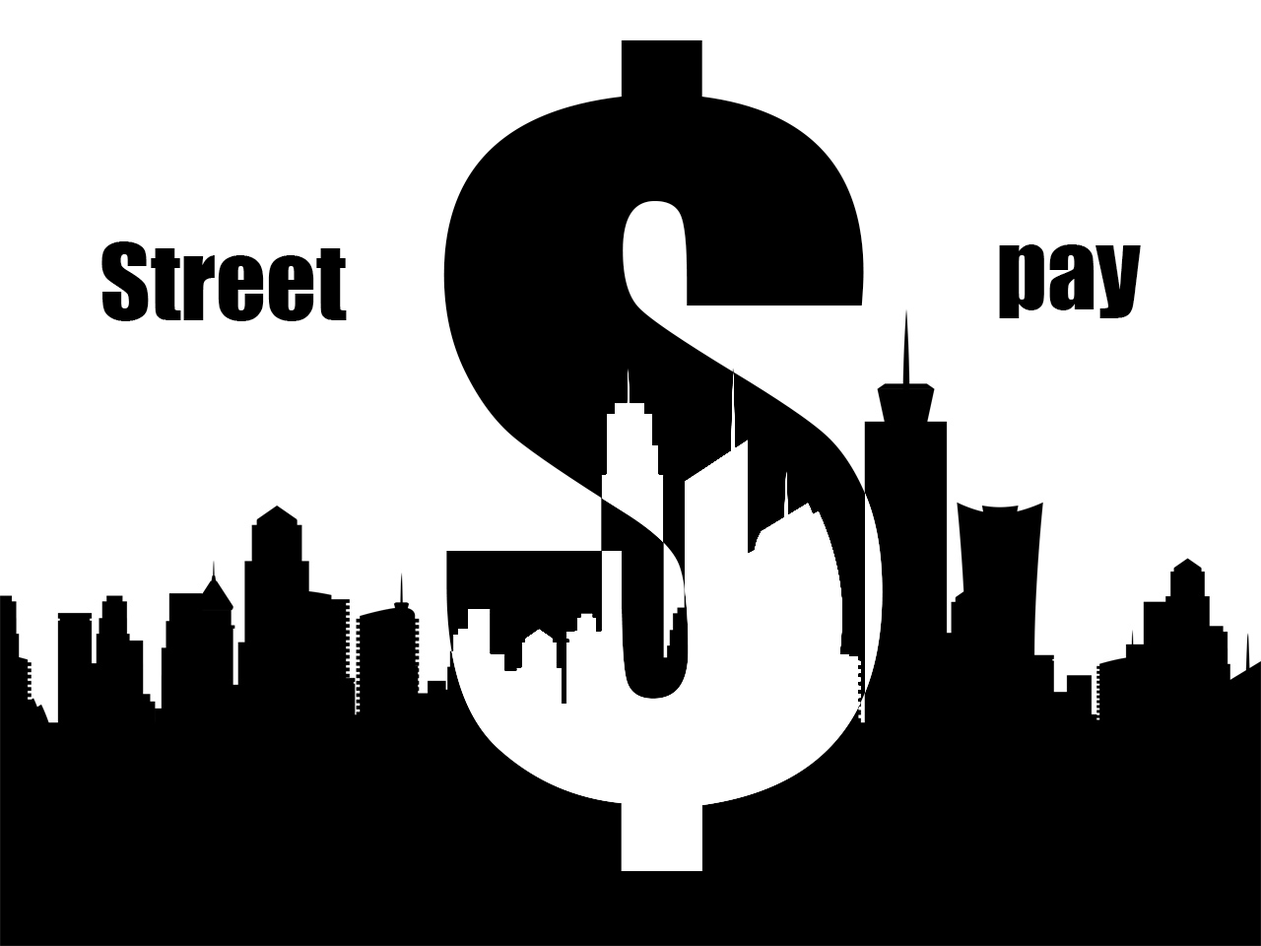
<style>
.page{position:relative;width:1261px;height:946px;background:#ffffff}
.page>*{position:absolute;margin:0}
.t1{font:98.5px "Impact";color:#000000}
</style>
<div class="page">
<p class="t1" style="left:101px;top:241px;width:246px;height:80px">Street</p>
<p class="t1" style="left:999px;top:244px;width:142px;height:74px">pay</p>
</div>
